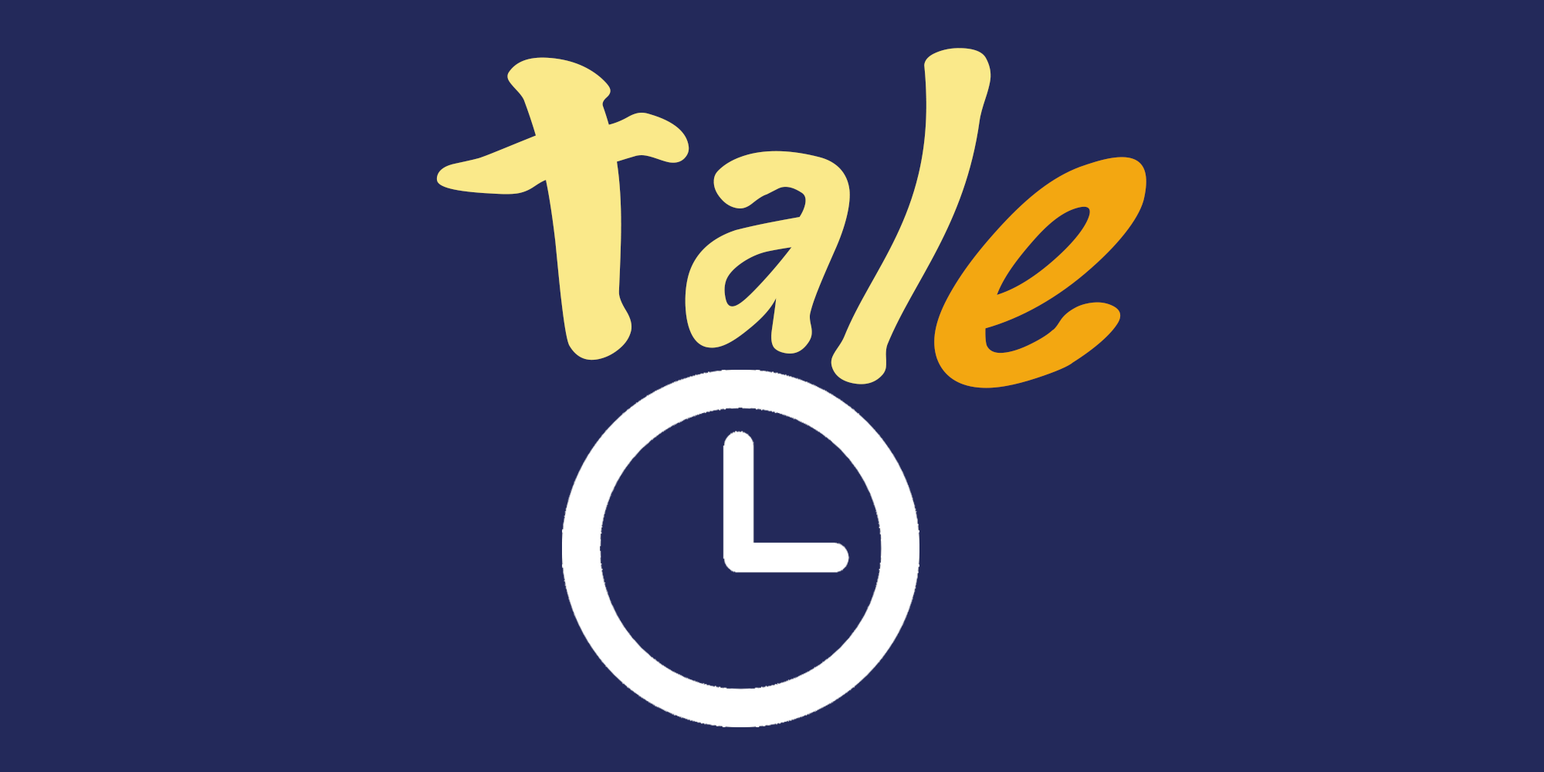
<style>
.page{position:relative;width:1544px;height:772px;background:#23295a}
.page>*{position:absolute;margin:0}
.t1{font:434.3px "MarkerFelt-Thin";color:#fae98a}
.t2{font:434.3px "MarkerFelt-Thin";color:#f3a711}
</style>
<div class="page">
<p class="t1" style="left:436px;top:48px;width:711px;height:340px">tal<span class="t2">e</span></p>
</div>
